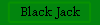
<style>
.page{position:relative;width:100px;height:25px;background:#02850e}
.page>*{position:absolute;margin:0}
.t1{font:13.9px "FootlightMTLight";color:#000000}
</style>
<div class="page">
<p class="t1" style="left:21px;top:6px;width:59px;height:13px">Black Jack</p>
</div>
